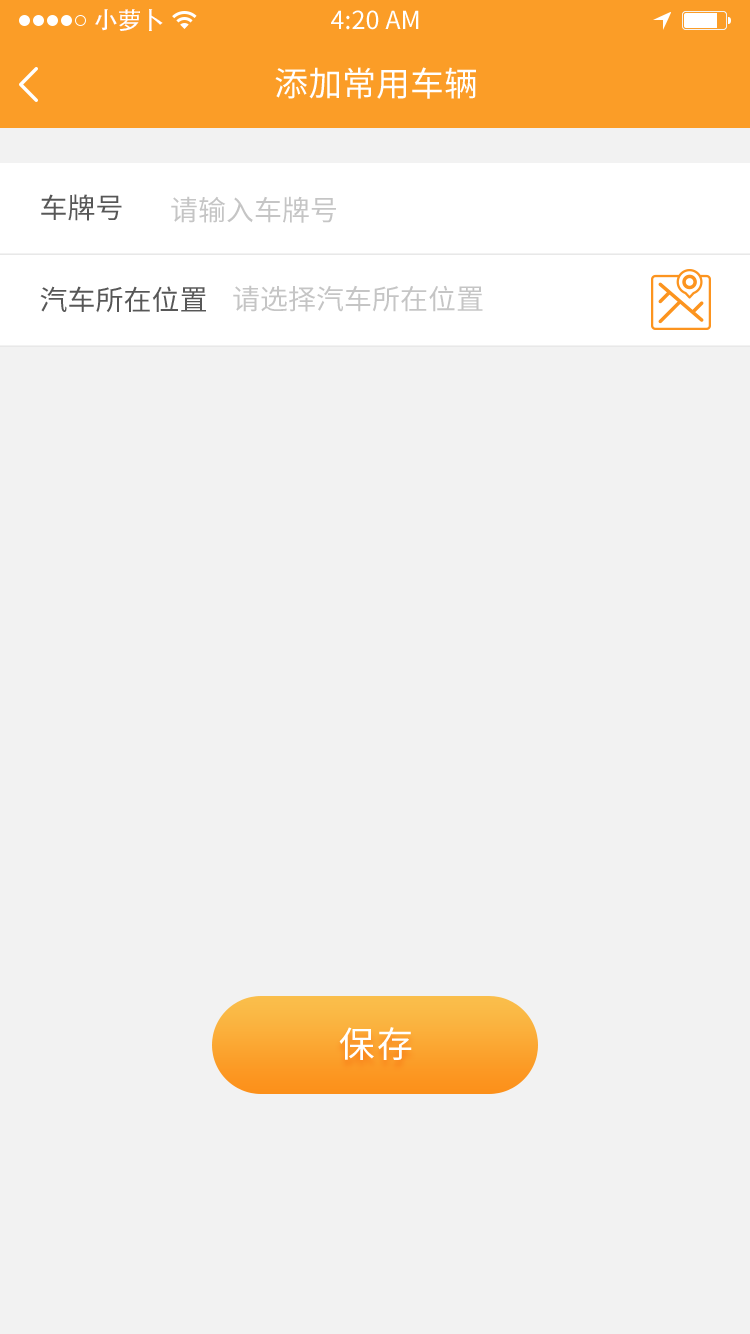
<style>
.page{position:relative;width:750px;height:1334px;background:#f2f2f2}
.page>*{position:absolute;margin:0}
.t1{font:24px "AdobeHeitiStd-Regular";color:#ffffff}
.t2{font:25px "SourceHanSansCN-Regular";color:#ffffff}
.t3{font:34px "SourceHanSansCN-Regular";color:#ffffff}
.t4{font:28px "SourceHanSansCN-Regular";color:#575757}
.t5{font:28px "SourceHanSansCN-Regular";color:#c5c5c5}
.t6{font:36px "SourceHanSansCN-Regular";letter-spacing:0.06em;color:#ffffff}
</style>
<div class="page">
<p class="t1" style="left:95px;top:9px;width:68px;height:22px">小萝卜</p>
<p class="t2" style="left:331px;top:10px;width:88px;height:20px">4:20 AM</p>
<p class="t3" style="left:275px;top:67px;width:201px;height:32px">添加常用车辆</p>
<p class="t4" style="left:41px;top:194px;width:81px;height:27px">车牌号</p>
<p class="t5" style="left:171px;top:196px;width:165px;height:27px">请输入车牌号</p>
<p class="t4" style="left:40px;top:286px;width:166px;height:27px">汽车所在位置</p>
<p class="t5" style="left:233px;top:285px;width:250px;height:27px">请选择汽车所在位置</p>
<p class="t6" style="left:339px;top:1027px;width:73px;height:33px">保存</p>
</div>
